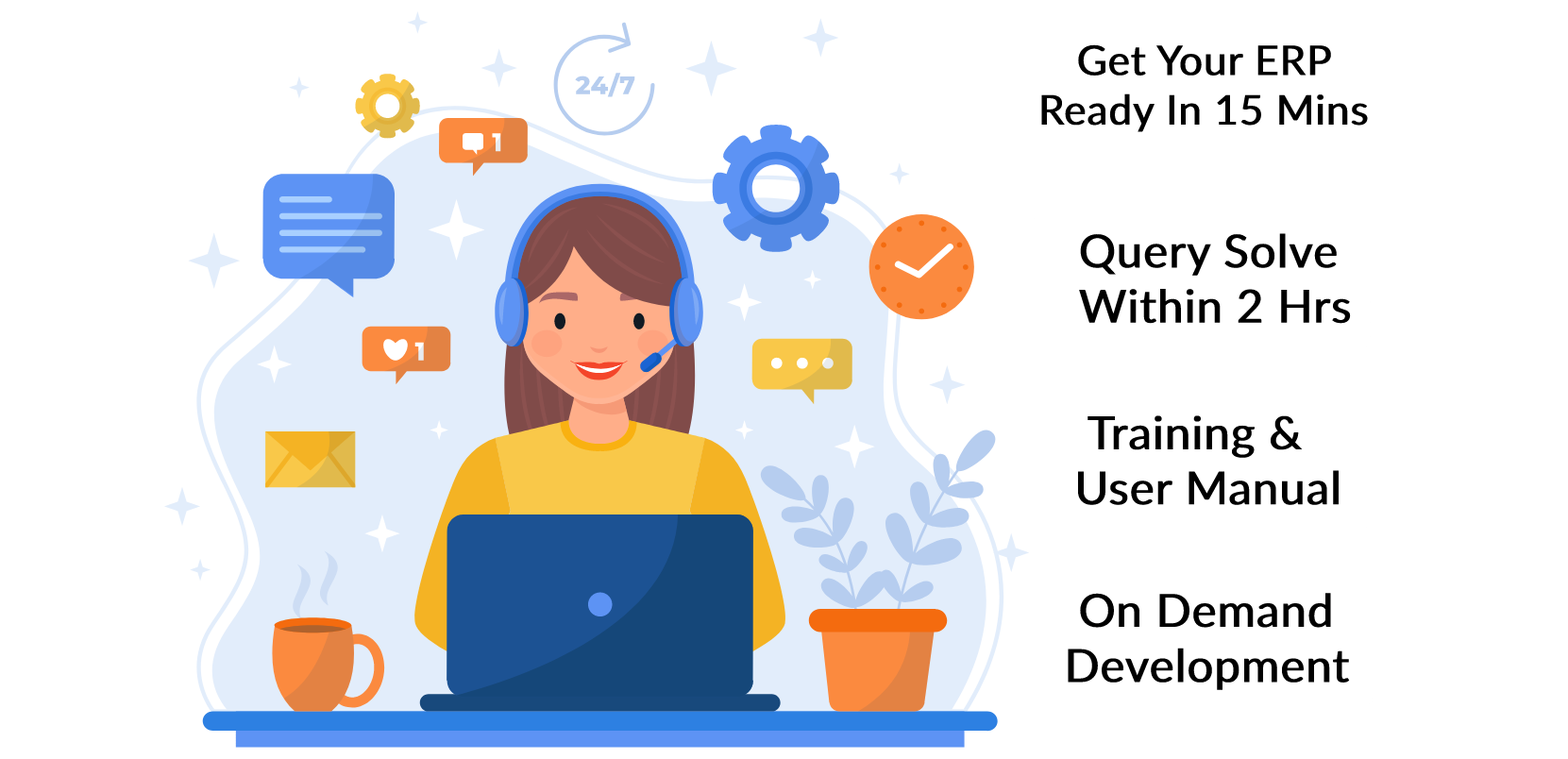
<style>
.page{position:relative;width:1568px;height:759px;background:#ffffff}
.page>*{position:absolute;margin:0}
.t1{font:41.3px "Lato-Regular";color:#000000;font-weight:bold}
.t2{font:25.3px "Montserrat-ExtraBold";color:#b6cdef}
.t3{font:25.6px "Montserrat-ExtraBold";color:#ffffff}
.t4{font:46px "Lato-Regular";color:#000000;font-weight:bold}
</style>
<div class="page">
<p class="t1" style="left:1041px;top:44px;width:327px;height:88px">Get Your ERP <br>Ready In 15 Mins</p>
<p class="t2" style="left:575px;top:73px;width:60px;height:24px">24/7</p>
<p class="t3" style="left:492px;top:133px;width:9px;height:19px">1</p>
<p class="t4" style="left:1079px;top:233px;width:272px;height:91px">Query Solve<br>Within 2 Hrs</p>
<p class="t3" style="left:414px;top:342px;width:10px;height:19px">1</p>
<p class="t4" style="left:1078px;top:415px;width:261px;height:90px">Training &amp;<br>User Manual</p>
<p class="t4" style="left:1068px;top:593px;width:282px;height:97px">On Demand<br>Development</p>
</div>
